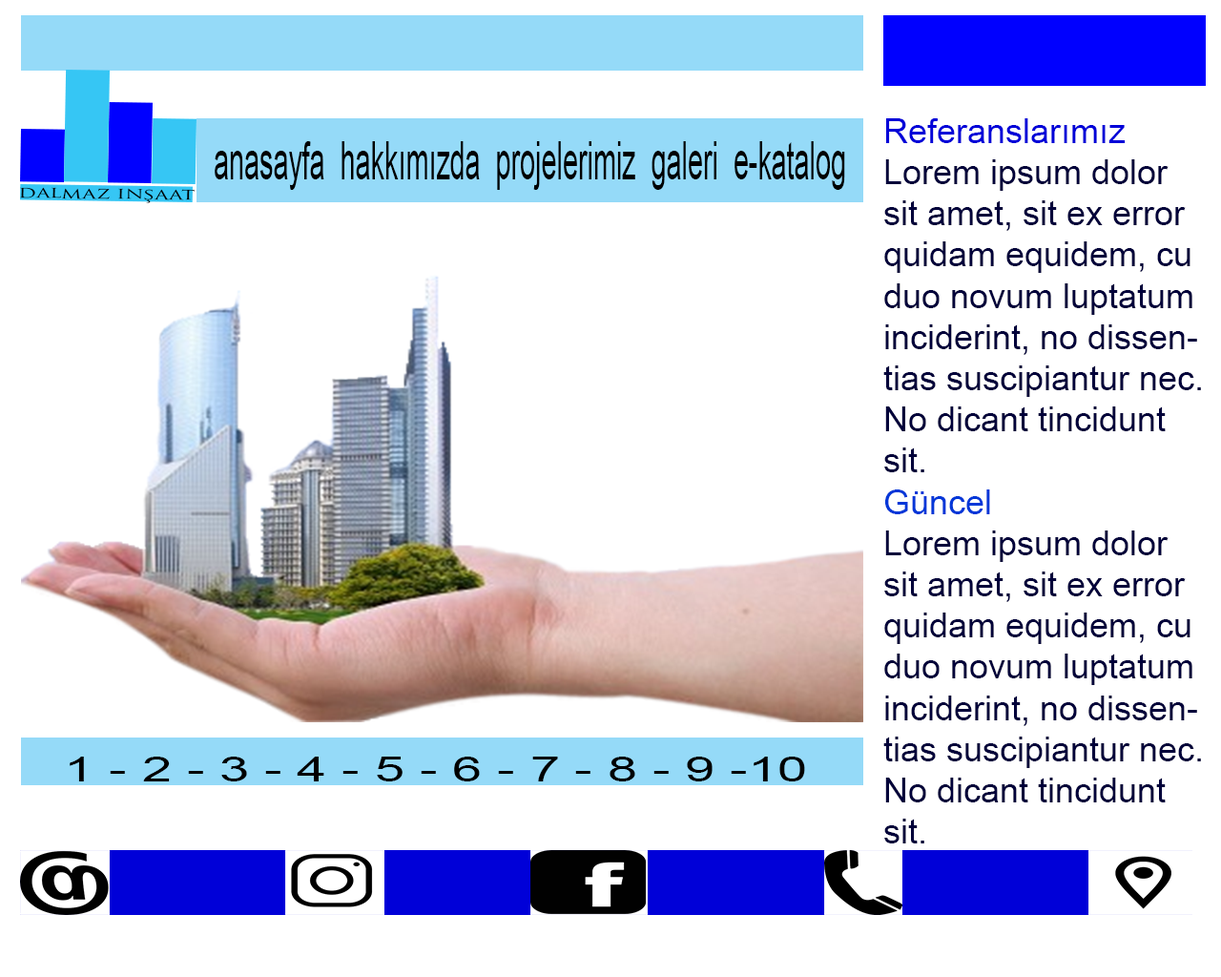
<style>
.page{position:relative;width:1221px;height:977px;background:#ffffff}
.page>*{position:absolute;margin:0}
.t1{font:34.3px "ArialMT";color:#00003a}
.t2{font:34.3px "ArialMT";color:#0000d8}
.t3{font:34.3px "ArialMT";color:#0037d8}
.t4{font:53.2px "ArialMT";color:#000000;scale:0.52 1}
.t5{font:15.1px "TrajanPro-Regular";color:#000000;scale:1.47 1}
.t6{font:34.7px "ArialMT";color:#000000;scale:1.55 1}
</style>
<div class="page">
<p class="t1" style="left:883px;top:118px;width:318px;height:725px"><span class="t2">Referanslarımız<br></span>Lorem ipsum dolor sit amet, sit ex error quidam equidem, cu duo novum luptatum inciderint, no dissentias suscipiantur nec. No dicant tincidunt sit.<br><span class="t3">Güncel<br></span>Lorem ipsum dolor sit amet, sit ex error quidam equidem, cu duo novum luptatum inciderint, no dissentias suscipiantur nec. No dicant tincidunt sit.</p>
<p class="t4" style="left:215px;top:141px;width:630px;height:49px">anasayfa  hakkımızda  projelerimiz  galeri  e-katalog</p>
<p class="t5" style="left:20px;top:187px;width:175px;height:16px;rotate:1deg">dalmaz inşaat</p>
<p class="t6" style="left:70px;top:756px;width:735px;height:25px">1 - 2 - 3 - 4 - 5 - 6 - 7 - 8 - 9 -10</p>
</div>
